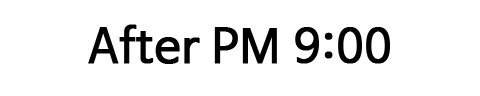
<style>
.page{position:relative;width:480px;height:96px;background:#ffffff}
.page>*{position:absolute;margin:0}
.t1{font:46px "NanumBarunGothic";color:#000000;font-weight:bold}
</style>
<div class="page">
<p class="t1" style="left:88px;top:24px;width:302px;height:40px">After PM 9:00</p>
</div>
